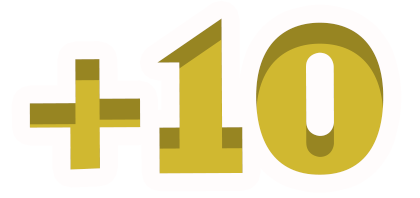
<style>
.page{position:relative;width:420px;height:198px;background:#ffffff}
.page>*{position:absolute;margin:0}
.t1{font:204.1px "BadTyp-Regular";color:#d0b830}
</style>
<div class="page">
<p class="t1" style="left:29px;top:18px;width:355px;height:157px">+10</p>
</div>
